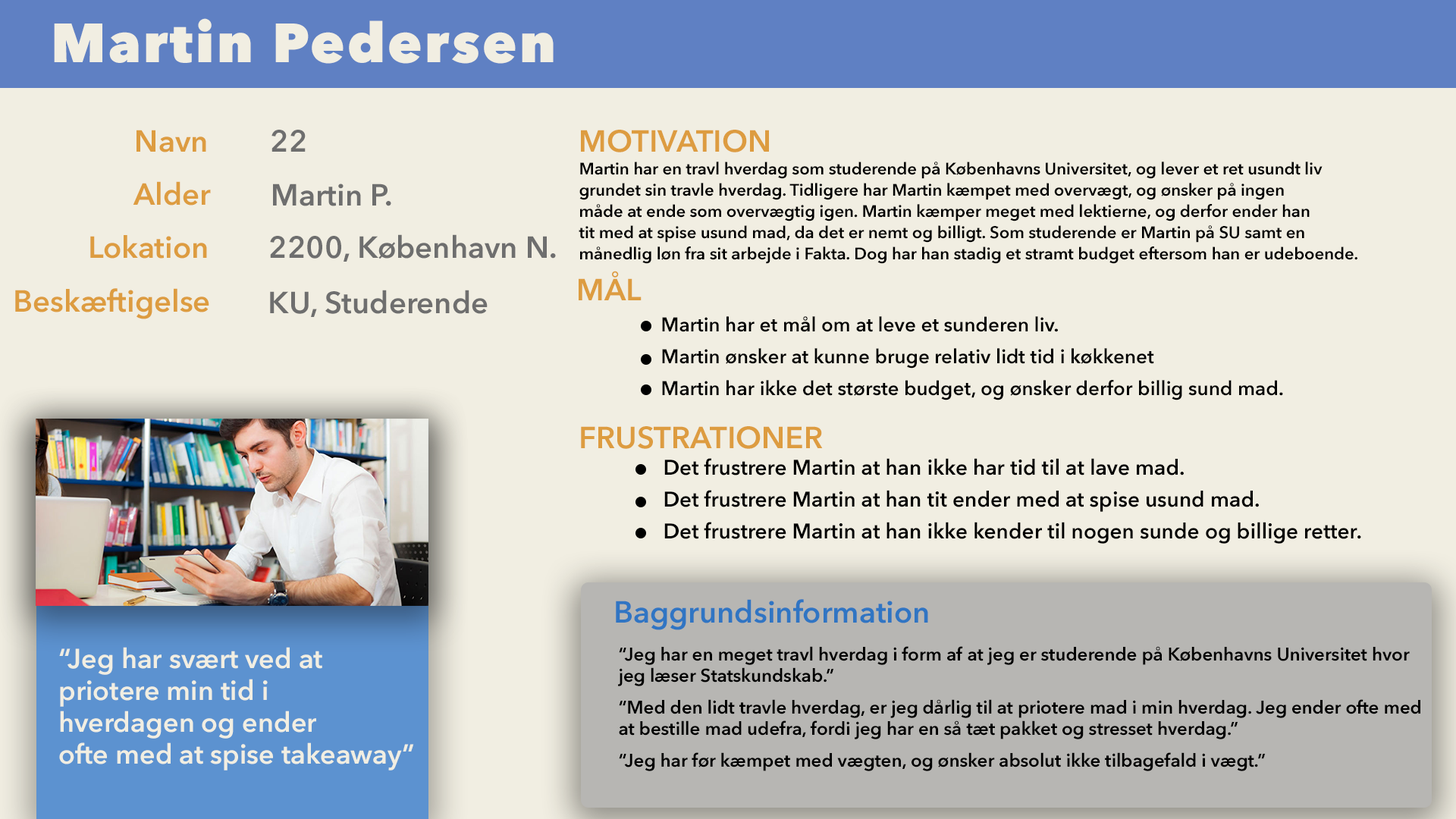
<style>
.page{position:relative;width:1456px;height:819px;background:#f1eee2}
.page>*{position:absolute;margin:0}
.t1{font:54.6px "AvenirNext-Heavy";letter-spacing:0.05em;color:#f1eee2}
.t2{font:30.3px "AvenirNext-DemiBold";color:#dd9c40}
.t3{font:30.3px "AvenirNext-DemiBold";color:#7c7c7c}
.t4{font:16.7px/10.6px "AvenirNext-DemiBold";color:#000000}
.t5{font:30.3px "AvenirNext-DemiBold";color:#6e6e6e}
.t6{font:19.7px/10.6px "AvenirNext-DemiBold";color:#000000}
.t7{font:18.2px/10.6px "AvenirNext-DemiBold";color:#000000}
.t8{font:21.2px/10.6px "AvenirNext-DemiBold";color:#000000}
.t9{font:30.3px "AvenirNext-DemiBold";color:#3075c3}
.t10{font:27.3px/10.6px "AvenirNext-DemiBold";color:#f1eee2}
</style>
<div class="page">
<p class="t1" style="left:54px;top:18px;width:500px;height:46px">Martin Pedersen</p>
<p class="t2" style="left:136px;top:130px;width:70px;height:22px">Navn</p>
<p class="t3" style="left:271px;top:130px;width:35px;height:22px">22</p>
<p class="t2" style="left:581px;top:130px;width:188px;height:22px">MOTIVATION</p>
<p class="t4" style="left:579px;top:162px;width:778px;height:102px">Martin har en travl hverdag som studerende på Københavns Universitet, og lever et ret usundt liv<br><br>grundet sin travle hverdag. Tidligere har Martin kæmpet med overvægt, og ønsker på ingen<br><br>måde at ende som overvægtig igen. Martin kæmper meget med lektierne, og derfor ender han <br><br>tit med at spise usund mad, da det er nemt og billigt. Som studerende er Martin på SU samt en <br><br>månedlig løn fra sit arbejde i Fakta. Dog har han stadig et stramt budget eftersom han er udeboende.</p>
<p class="t2" style="left:133px;top:181px;width:78px;height:25px">Alder</p>
<p class="t5" style="left:273px;top:184px;width:118px;height:22px">Martin P.</p>
<p class="t2" style="left:90px;top:235px;width:117px;height:24px">Lokation</p>
<p class="t5" style="left:270px;top:234px;width:286px;height:28px">2200, København N.</p>
<p class="t2" style="left:579px;top:271px;width:63px;height:29px">MÅL</p>
<p class="t2" style="left:15px;top:288px;width:194px;height:31px">Beskæftigelse</p>
<p class="t5" style="left:270px;top:290px;width:218px;height:27px">KU, Studerende</p>
<p class="t6" style="left:662px;top:316px;width:621px;height:84px"><span class="t7">   </span>Martin har et mål om at leve et sunderen liv.<br><br><br>   Martin ønsker at kunne bruge relativ lidt tid i køkkenet<br><br><br>   Martin har ikke det største budget, og ønsker derfor billig sund mad.</p>
<p class="t2" style="left:581px;top:426px;width:242px;height:23px">FRUSTRATIONER</p>
<p class="t8" style="left:664px;top:458px;width:697px;height:86px"><span class="t7">  </span> Det frustrere Martin at han ikke har tid til at lave mad.<br><br>   <br>   Det frustrere Martin at han tit ender med at spise usund mad.<br><br><br>   Det frustrere Martin at han ikke kender til nogen sunde og billige retter.</p>
<p class="t9" style="left:616px;top:599px;width:312px;height:31px">Baggrundsinformation</p>
<p class="t10" style="left:59px;top:647px;width:355px;height:123px">“Jeg har svært ved at <br><br><br>priotere min tid i <br><br><br>hverdagen og ender <br><br><br>ofte med at spise takeaway”</p>
<p class="t7" style="left:618px;top:646px;width:802px;height:125px">“Jeg har en meget travl hverdag i form af at jeg er studerende på Københavns Universitet hvor <br><br>jeg læser Statskundskab.”<br><br><br>“Med den lidt travle hverdag, er jeg dårlig til at priotere mad i min hverdag. Jeg ender ofte med <br><br>at bestille mad udefra, fordi jeg har en så tæt pakket og stresset hverdag.”<br><br><br>“Jeg har før kæmpet med vægten, og ønsker absolut ikke tilbagefald i vægt.”</p>
</div>
